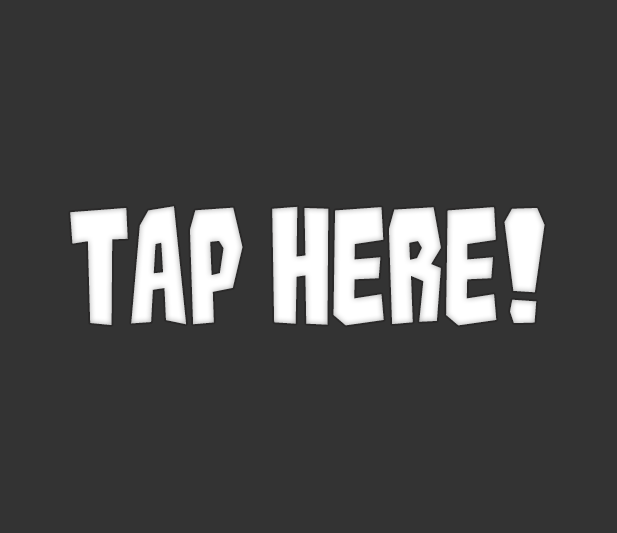
<style>
.page{position:relative;width:617px;height:533px;background:#333333}
.page>*{position:absolute;margin:0}
.t1{font:141.1px "Kaiju-Monster__G";color:#ffffff}
</style>
<div class="page">
<p class="t1" style="left:70px;top:206px;width:475px;height:120px">Tap Here!</p>
</div>
